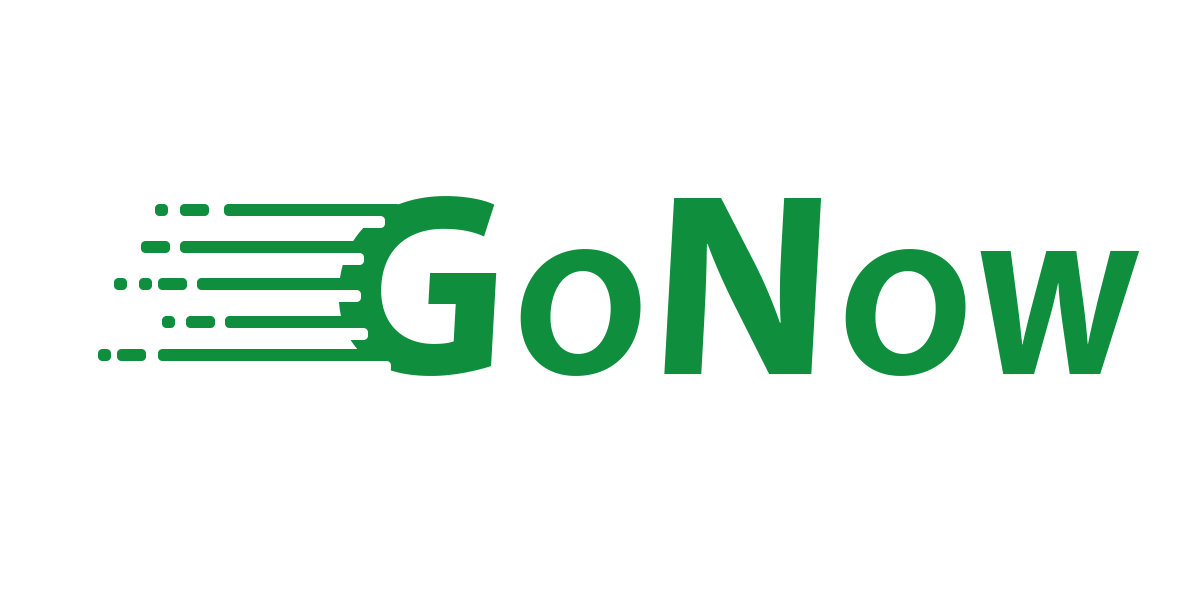
<style>
.page{position:relative;width:1200px;height:600px;background:#ffffff}
.page>*{position:absolute;margin:0}
.t1{font:261.3px "MyriadPro-Bold";letter-spacing:0.025em;color:#0f8e3d;font-variant:small-caps}
</style>
<div class="page">
<p class="t1" style="left:338px;top:196px;width:802px;height:180px">GoNow</p>
</div>
